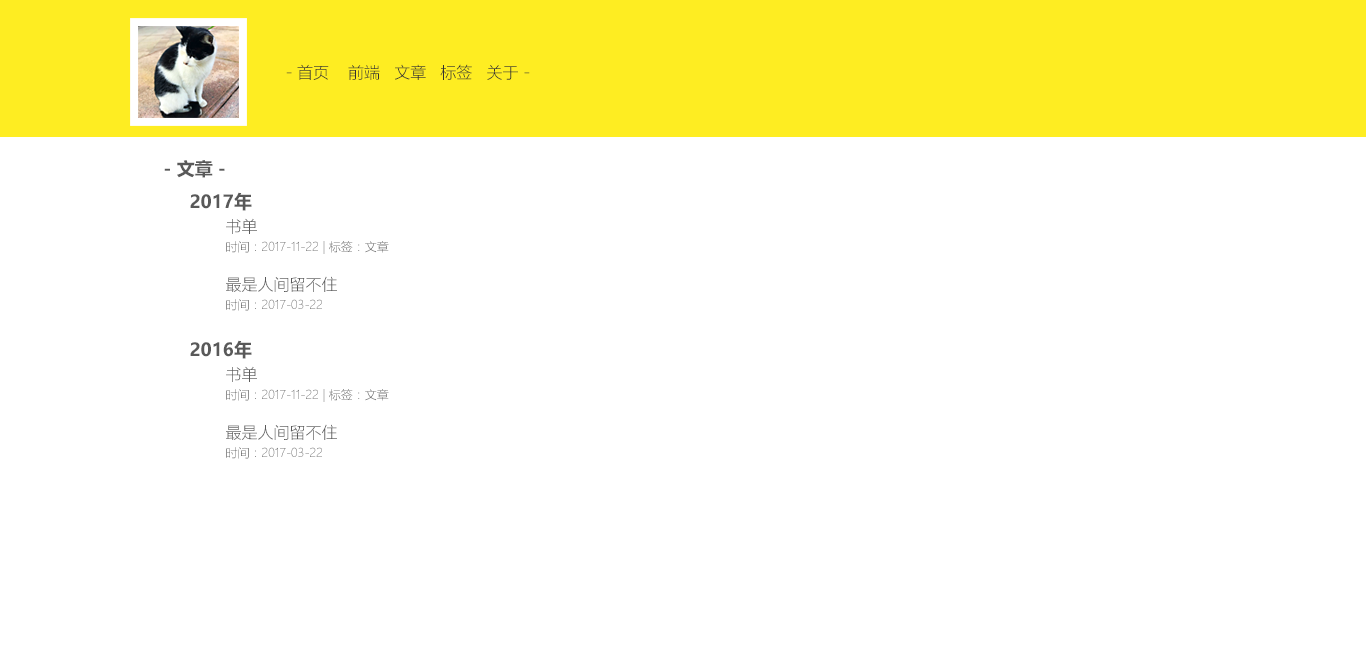
<style>
.page{position:relative;width:1366px;height:650px;background:#ffffff}
.page>*{position:absolute;margin:0}
.t1{font:16px "MicrosoftYaHeiLight";color:#313131}
.t2{font:18px "MicrosoftYaHei-Bold";color:#595959}
.t3{font:12px "MicrosoftYaHeiLight";color:#595959}
.t4{font:16px/24px "MicrosoftYaHeiLight";color:#595959}
</style>
<div class="page">
<p class="t1" style="left:286px;top:64px;width:244px;height:16px">- 首页    前端   文章   标签   关于 -</p>
<p class="t2" style="left:164px;top:160px;width:61px;height:18px">- 文章 -</p>
<p class="t3" style="left:190px;top:192px;width:199px;height:119px"><span class="t2">2017年<br> </span><span class="t4">书单<br> </span>时间：2017-11-22 | 标签：文章<br><br> <span class="t4">最是人间留不住<br> </span>时间：2017-03-22</p>
<p class="t3" style="left:190px;top:340px;width:199px;height:119px"><span class="t2">2016年<br> </span><span class="t4">书单<br> </span>时间：2017-11-22 | 标签：文章<br><br> <span class="t4">最是人间留不住<br> </span>时间：2017-03-22</p>
</div>
